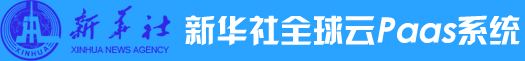
<style>
.page{position:relative;width:525px;height:61px;background:#2aa2ff}
.page>*{position:absolute;margin:0}
.t1{font:32px "HYk2gj";color:#ffffff}
.t2{font:32px "hzgb";color:#ffffff;font-style:italic}
</style>
<div class="page">
<p class="t1" style="left:185px;top:15px;width:335px;height:31px">新华社全球云<span class="t2">Paas</span>系统</p>
</div>
